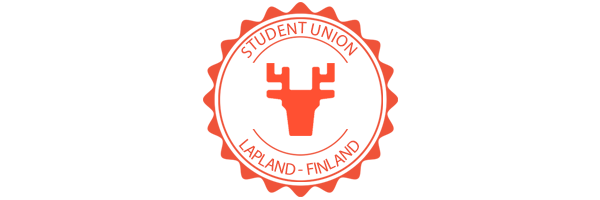
<style>
.page{position:relative;width:600px;height:200px;background:#ffffff}
.page>*{position:absolute;margin:0}
.t1{font:16.7px "MyriadPro-Regular";color:#ef5339;text-transform:uppercase}
.t2{font:8.4px "MyriadPro-Regular";color:#ef5339;text-transform:uppercase}
</style>
<div class="page">
<p class="t1" style="left:241px;top:21px;width:117px;height:38px">Student union</p>
<p class="t1" style="left:238px;top:138px;width:121px;height:37px"><span class="t2">                                               </span>Lapland - Finland</p>
</div>
